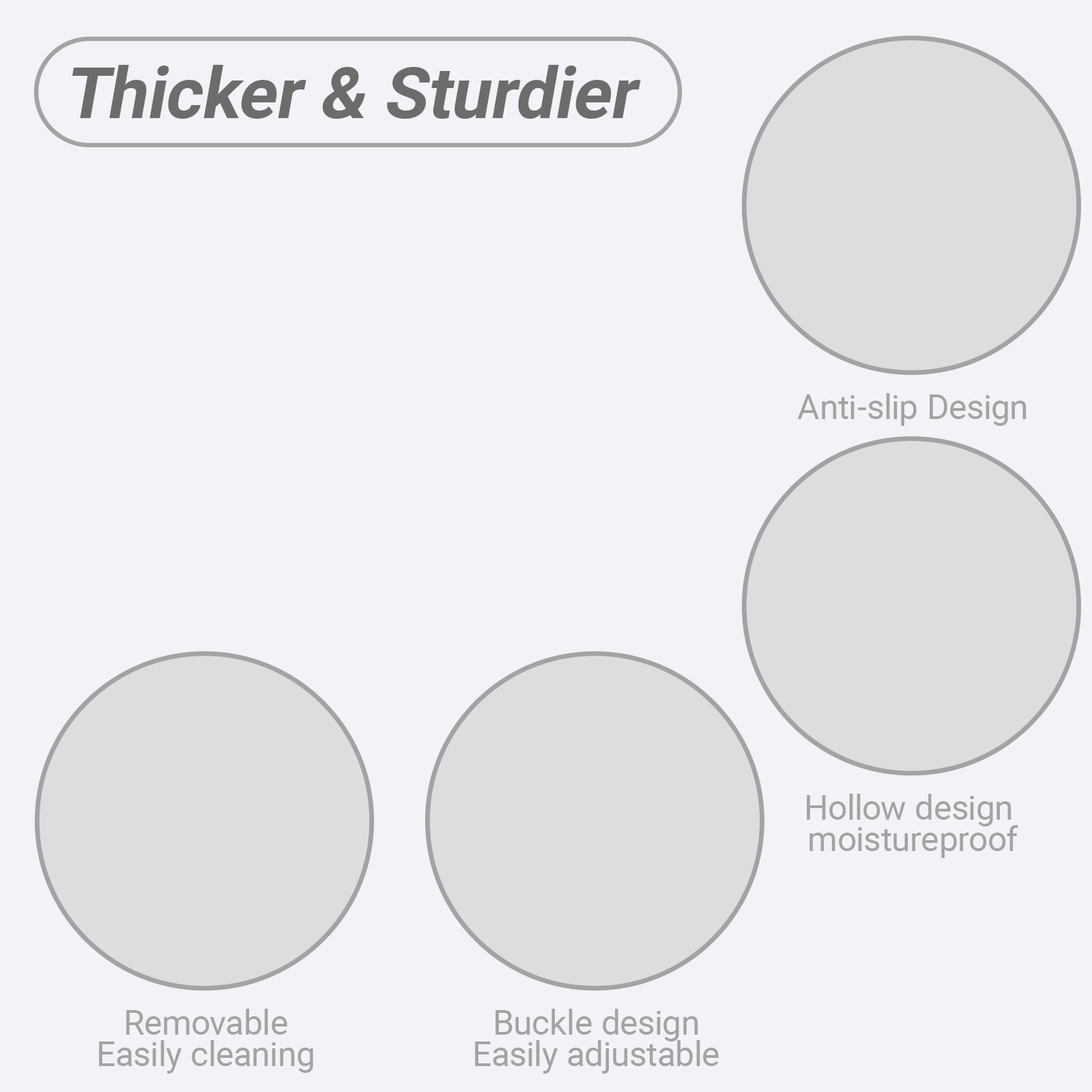
<style>
.page{position:relative;width:1092px;height:1092px;background:#f2f3f6}
.page>*{position:absolute;margin:0}
.t1{font:70.9px "Roboto-Bold";color:#6c6c6c;font-style:italic}
.t2{font:34.1px "Roboto-Regular";color:#a3a3a3}
.t3{font:34.1px/31.5px "Roboto-Regular";color:#a3a3a3}
</style>
<div class="page">
<p class="t1" style="left:72px;top:65px;width:569px;height:54px">Thicker &amp; Sturdier</p>
<p class="t2" style="left:797px;top:393px;width:229px;height:33px">Anti-slip Design</p>
<p class="t3" style="left:807px;top:794px;width:211px;height:64px;text-align:center">Hollow design <br>moistureproof</p>
<p class="t3" style="left:99px;top:1009px;width:214px;height:65px;text-align:center">Removable<br>Easily cleaning</p>
<p class="t3" style="left:475px;top:1009px;width:244px;height:65px;text-align:center">Buckle design<br>Easily adjustable</p>
</div>
